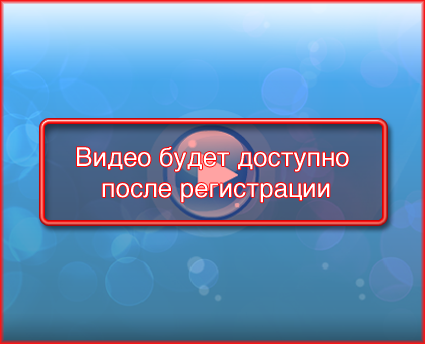
<style>
.page{position:relative;width:425px;height:344px}
.page>*{position:absolute;margin:0}
.t1{font:26px "HelveticaC";color:#ffffff}
</style>
<div class="page">
<p class="t1" style="left:77px;top:147px;width:272px;height:56px;text-align:center">Видео будет доступно <br>после регистрации</p>
</div>
